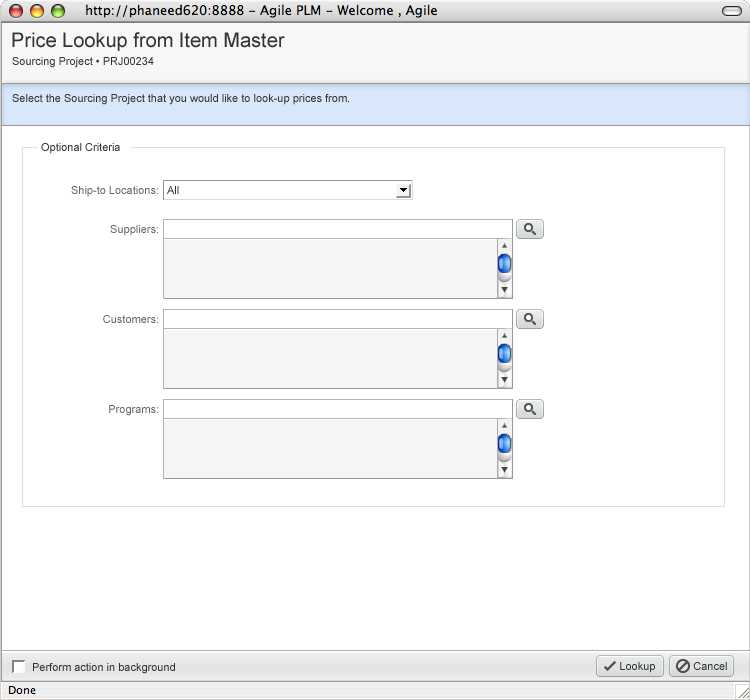
<style>
.page{position:relative;width:750px;height:700px;background:#ffffff}
.page>*{position:absolute;margin:0}
.t1{font:20px "ArialMT";color:#333333}
.t2{font:11px "ArialMT";color:#333333}
.t3{font:11px "ArialMT";color:#666666}
</style>
<div class="page">
<p class="t1" style="left:12px;top:32px;width:273px;height:19px">Price Lookup from Item Master</p>
<p class="t2" style="left:12px;top:57px;width:142px;height:11px">Sourcing Project • PRJ00234</p>
<p class="t2" style="left:12px;top:94px;width:337px;height:11px">Select the Sourcing Project that you would like to look-up prices from.</p>
<p class="t2" style="left:41px;top:143px;width:79px;height:11px">Optional Criteria</p>
<p class="t3" style="left:71px;top:186px;width:87px;height:11px">Ship-to Locations:</p>
<p class="t2" style="left:167px;top:186px;width:12px;height:8px">All</p>
<p class="t3" style="left:110px;top:225px;width:48px;height:11px">Suppliers:</p>
<p class="t3" style="left:103px;top:315px;width:55px;height:8px">Customers:</p>
<p class="t3" style="left:109px;top:405px;width:49px;height:11px">Programs:</p>
<p class="t2" style="left:33px;top:663px;width:142px;height:11px">Perform action in background</p>
<p class="t2" style="left:620px;top:662px;width:35px;height:11px">Lookup</p>
<p class="t2" style="left:693px;top:662px;width:34px;height:8px">Cancel</p>
</div>
